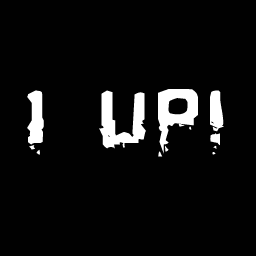
<style>
.page{position:relative;width:256px;height:256px;background:#010101}
.page>*{position:absolute;margin:0}
.t1{font:96px "BiometricJoe";letter-spacing:0.075em;color:#ffffff}
</style>
<div class="page">
<p class="t1" style="left:27px;top:89px;width:197px;height:68px">1 UP!</p>
</div>
